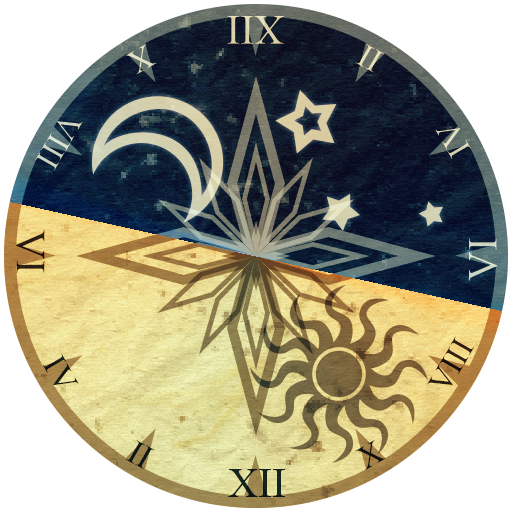
<style>
.page{position:relative;width:512px;height:512px;background:#ffffff}
.page>*{position:absolute;margin:0}
.t1{font:41.7px "TimesNewRomanPSMT";color:#dad1aa}
.t2{font:32.9px "TimesNewRomanPSMT";color:#e1e1c7}
.t3{font:33px "TimesNewRomanPSMT";color:#e5dfbe}
.t4{font:33.1px "TimesNewRomanPSMT";color:#ced5c3}
.t5{font:33px "TimesNewRomanPSMT";color:#dadabf}
.t6{font:41.7px "TimesNewRomanPSMT";color:#251401}
.t7{font:41.7px "TimesNewRomanPSMT";color:#ced5c3}
.t8{font:32.7px "TimesNewRomanPSMT";color:#251401}
.t9{font:33.4px "TimesNewRomanPSMT";color:#131816}
.t10{font:33.4px "TimesNewRomanPSMT";color:#251401}
.t11{font:32.6px "TimesNewRomanPSMT";color:#251401}
.t12{font:41.7px "TimesNewRomanPSMT";color:#132320}
</style>
<div class="page">
<p class="t1" style="left:227px;top:16px;width:57px;height:28px;rotate:180deg">XII</p>
<p class="t2" style="left:125px;top:44px;width:32px;height:31px;rotate:150deg">X</p>
<p class="t3" style="left:355px;top:44px;width:29px;height:29px;rotate:-150deg">II</p>
<p class="t4" style="left:35px;top:121px;width:48px;height:50px;rotate:120deg">VIII</p>
<p class="t5" style="left:435px;top:128px;width:36px;height:32px;rotate:-120deg">IV</p>
<p class="t6" style="left:16px;top:230px;width:29px;height:43px;rotate:90deg">VI</p>
<p class="t7" style="left:468px;top:238px;width:30px;height:43px;rotate:-90deg">VI</p>
<p class="t8" style="left:427px;top:336px;width:47px;height:49px;rotate:-60deg">VIII</p>
<p class="t9" style="left:42px;top:353px;width:37px;height:33px;rotate:60deg">IV</p>
<p class="t10" style="left:125px;top:440px;width:30px;height:29px;rotate:30deg">II</p>
<p class="t11" style="left:355px;top:440px;width:31px;height:30px;rotate:-30deg">X</p>
<p class="t12" style="left:228px;top:469px;width:57px;height:28px">XII</p>
</div>
